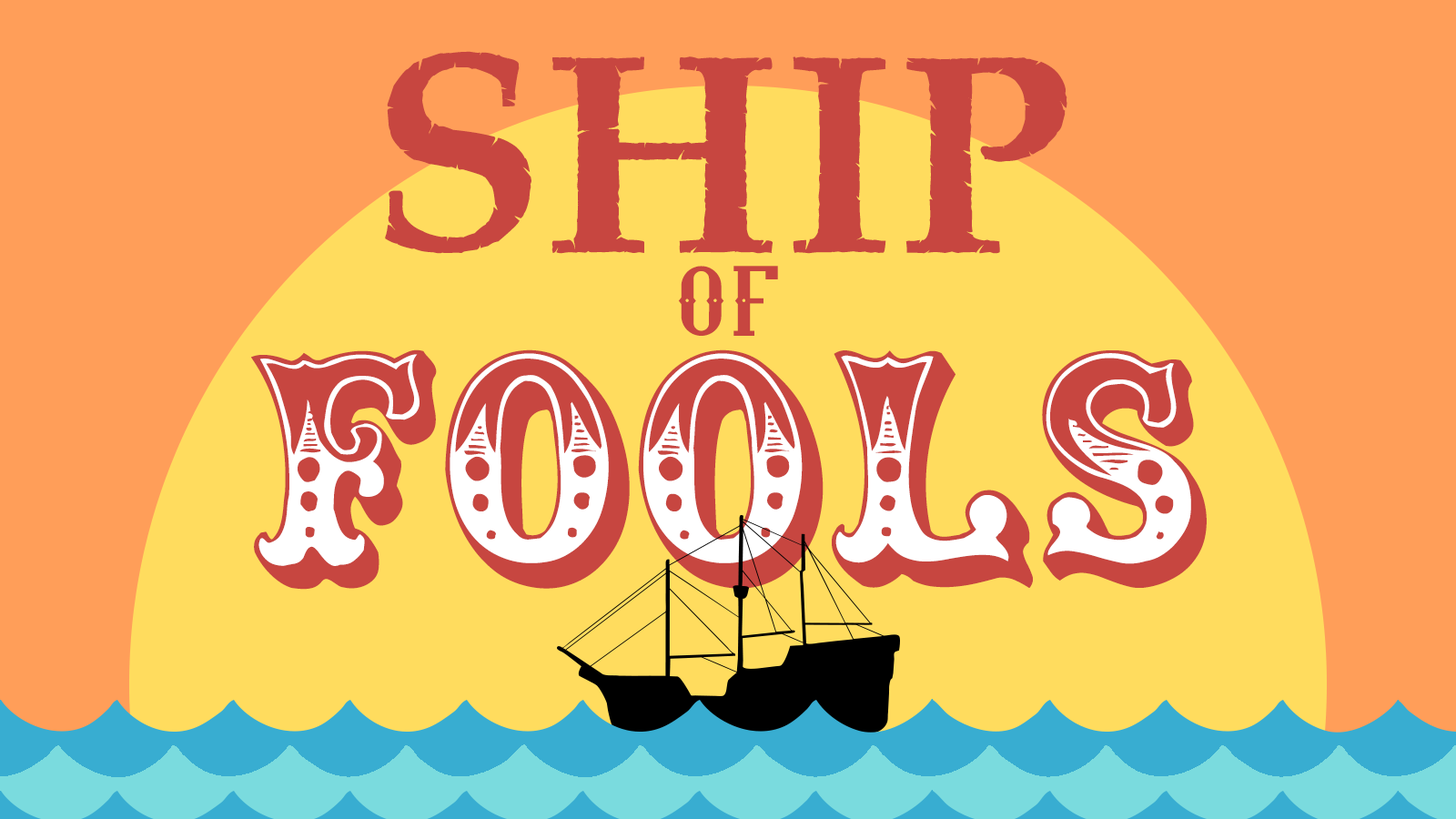
<style>
.page{position:relative;width:1456px;height:819px;background:#ff9e59}
.page>*{position:absolute;margin:0}
.t1{font:293.6px "PiratesBay";letter-spacing:0.1em;color:#c74640;text-transform:uppercase}
.t2{font:70.6px "CircusWorldDemoRegular";letter-spacing:0.1em;color:#c74640}
.t3{font:296.9px "Circus";color:#c74640;text-transform:uppercase}
</style>
<div class="page">
<p class="t1" style="left:385px;top:51px;width:682px;height:203px">SHIP</p>
<p class="t2" style="left:678px;top:266px;width:100px;height:70px">OF</p>
<p class="t3" style="left:251px;top:349px;width:956px;height:241px">FOOLS</p>
</div>
